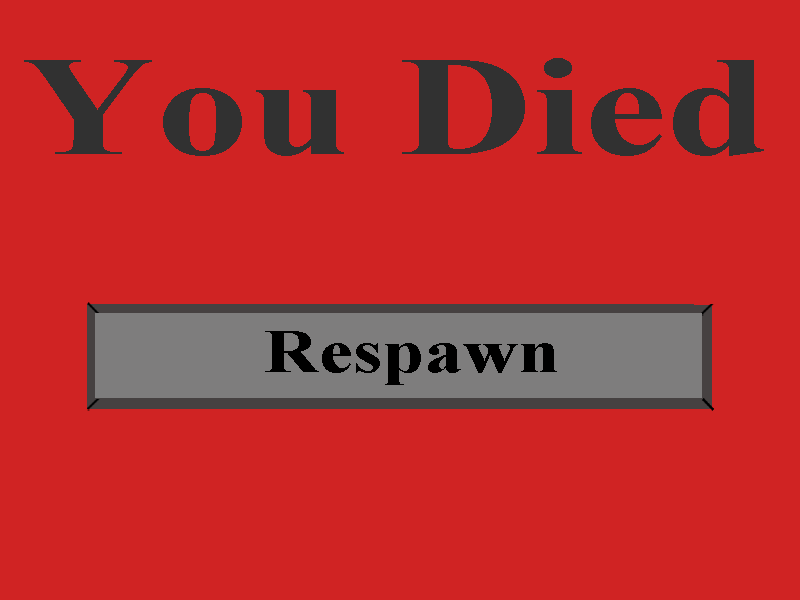
<style>
.page{position:relative;width:800px;height:600px;background:#d02323}
.page>*{position:absolute;margin:0}
.t1{font:141.9px "TimesNewRomanPS-BoldMT";color:#313131;scale:1.31 1}
.t2{font:61.8px "TimesNewRomanPS-BoldMT";color:#000000;scale:1.23 1}
</style>
<div class="page">
<p class="t1" style="left:24px;top:58px;width:740px;height:98px">You Died</p>
<p class="t2" style="left:265px;top:331px;width:292px;height:54px">Respawn</p>
</div>
